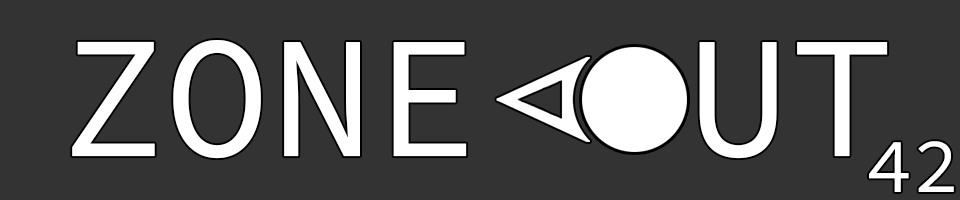
<style>
.page{position:relative;width:960px;height:200px;background:#333333}
.page>*{position:absolute;margin:0}
.t1{font:173.6px "SourceCodeVariable-Roman";color:#ffffff}
.t2{font:78.1px "SourceCodeVariable-Roman";color:#ffffff}
</style>
<div class="page">
<p class="t1" style="left:72px;top:40px;width:816px;height:119px">ZONE  UT</p>
<p class="t2" style="left:869px;top:141px;width:85px;height:51px">42</p>
</div>
